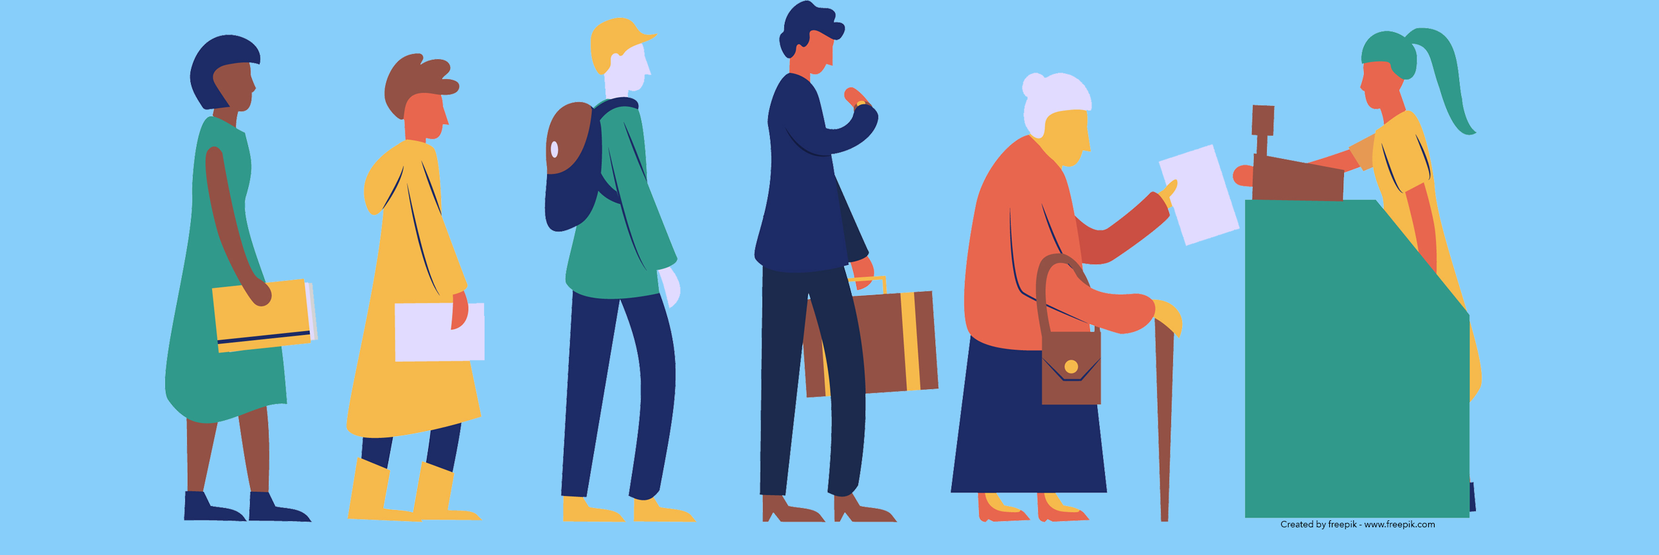
<style>
.page{position:relative;width:1659px;height:555px;background:#87cefa}
.page>*{position:absolute;margin:0}
.t1{font:9px "AvenirNext-Regular";color:#000000}
</style>
<div class="page">
<p class="t1" style="left:1281px;top:520px;width:154px;height:9px">Created by freepik - www.freepik.com</p>
</div>
